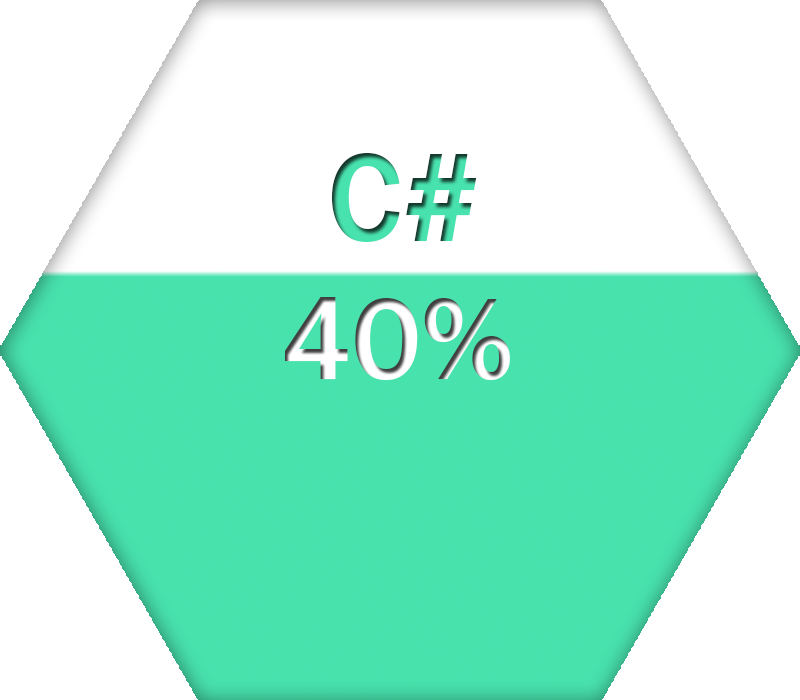
<style>
.page{position:relative;width:800px;height:700px;background:#ffffff}
.page>*{position:absolute;margin:0}
.t1{font:130px "FranklinGothic-Medium";color:#48e2ae}
.t2{font:120px "FranklinGothic-Medium"}
</style>
<div class="page">
<p class="t1" style="left:331px;top:153px;width:146px;height:89px">C#</p>
<p class="t2" style="left:285px;top:297px;width:225px;height:83px">40%</p>
</div>
